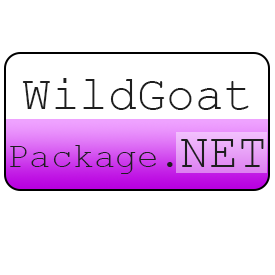
<style>
.page{position:relative;width:275px;height:275px;background:#ffffff}
.page>*{position:absolute;margin:0}
.t1{font:48px "CourierNewPSMT";color:#1e1e1e}
.t2{font:36px "CourierNewPSMT";color:#1e1e1e}
</style>
<div class="page">
<p class="t1" style="left:10px;top:78px;width:254px;height:96px;text-align:center">WildGoat<br><span class="t2">Package.</span>NET</p>
</div>
